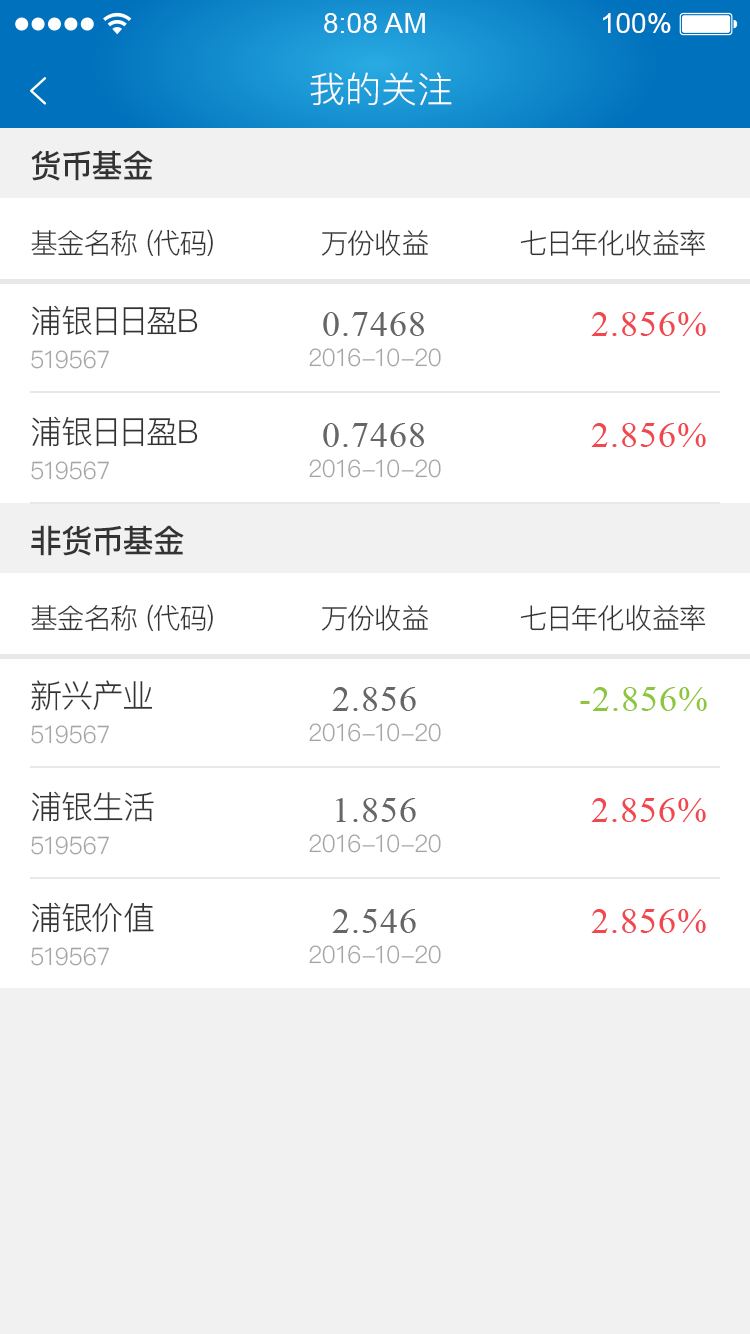
<style>
.page{position:relative;width:750px;height:1334px;background:#ffffff}
.page>*{position:absolute;margin:0}
.t1{font:28.1px "ArialMT";letter-spacing:0.006em;color:#ffffff}
.t2{font:28.1px "ArialMT";letter-spacing:0.005em;color:#ffffff}
.t3{font:28.1px "ArialMT";color:#ffffff}
.t4{font:36px "PingFang-SC-Regular";color:#ffffff}
.t5{font:32px "PingFang-SC-Bold";letter-spacing:-0.047em;color:#333333}
.t6{font:32px "PingFang-SC-Bold";letter-spacing:-0.045em;color:#333333}
.t7{font:32px "PingFang-SC-Bold";letter-spacing:-0.051em;color:#333333}
.t8{font:32px "PingFang-SC-Bold";color:#333333}
.t9{font:28px "PingFang-SC-Regular";letter-spacing:-0.052em;color:#333333}
.t10{font:28px "PingFang-SC-Regular";letter-spacing:-0.041em;color:#333333}
.t11{font:28px "PingFang-SC-Regular";letter-spacing:-0.048em;color:#333333}
.t12{font:28px "PingFang-SC-Regular";letter-spacing:-0.377em;color:#333333}
.t13{font:28px "PingFang-SC-Regular";letter-spacing:-0.09em;color:#333333}
.t14{font:28px "PingFang-SC-Regular";letter-spacing:-0.063em;color:#333333}
.t15{font:28px "PingFang-SC-Regular";letter-spacing:-0.075em;color:#333333}
.t16{font:28px "PingFang-SC-Regular";color:#333333}
.t17{font:28px "PingFang-SC-Regular";letter-spacing:-0.064em;color:#333333}
.t18{font:28px "PingFang-SC-Regular";letter-spacing:-0.038em;color:#333333}
.t19{font:28px "PingFang-SC-Regular";letter-spacing:-0.011em;color:#333333}
.t20{font:28px "PingFang-SC-Regular";letter-spacing:-0.097em;color:#333333}
.t21{font:28px "PingFang-SC-Regular";letter-spacing:-0.086em;color:#333333}
.t22{font:28px "PingFang-SC-Regular";letter-spacing:-0.05em;color:#333333}
.t23{font:28px "PingFang-SC-Regular";letter-spacing:-0.044em;color:#333333}
.t24{font:32px "PingFang-SC-Regular";letter-spacing:-0.039em;color:#333333}
.t25{font:32px "PingFang-SC-Regular";letter-spacing:-0.094em;color:#333333}
.t26{font:32px "PingFang-SC-Regular";letter-spacing:-0.145em;color:#333333}
.t27{font:32px "PingFang-SC-Regular";letter-spacing:-0.087em;color:#333333}
.t28{font:32px "PingFang-SC-Regular";letter-spacing:-0.038em;color:#333333}
.t29{font:32px "PingFang-SC-Regular";color:#333333}
.t30{font:36px "Helvetica-Bold";letter-spacing:0.025em;color:#666666}
.t31{font:36px "Helvetica-Bold";letter-spacing:0.024em;color:#666666}
.t32{font:36px "Helvetica-Bold";color:#666666}
.t33{font:36px "Helvetica-Bold";letter-spacing:0.025em;color:#f0484f}
.t34{font:36px "Helvetica-Bold";letter-spacing:0.024em;color:#f0484f}
.t35{font:36px "Helvetica-Bold";color:#f0484f}
.t36{font:24px "PingFang-SC-Regular";letter-spacing:-0.086em;color:#a5a5a5}
.t37{font:24px "PingFang-SC-Regular";letter-spacing:-0.094em;color:#a5a5a5}
.t38{font:24px "PingFang-SC-Regular";letter-spacing:-0.012em;color:#a5a5a5}
.t39{font:24px "PingFang-SC-Regular";letter-spacing:-0.019em;color:#a5a5a5}
.t40{font:24px "PingFang-SC-Regular";letter-spacing:-0.048em;color:#a5a5a5}
.t41{font:24px "PingFang-SC-Regular";color:#a5a5a5}
.t42{font:24px "PingFang-SC-Regular";letter-spacing:-0.029em;color:#a5a5a5}
.t43{font:24px "PingFang-SC-Regular";letter-spacing:-0.058em;color:#a5a5a5}
.t44{font:24px "PingFang-SC-Regular";letter-spacing:-0.09em;color:#a5a5a5}
.t45{font:24px "PingFang-SC-Regular";letter-spacing:0.008em;color:#a5a5a5}
.t46{font:24px "PingFang-SC-Regular";letter-spacing:-0.099em;color:#a5a5a5}
.t47{font:24px "PingFang-SC-Regular";letter-spacing:0.01em;color:#a5a5a5}
.t48{font:24px "PingFang-SC-Regular";letter-spacing:-0.043em;color:#a5a5a5}
.t49{font:24px "PingFang-SC-Regular";letter-spacing:-0.028em;color:#a5a5a5}
.t50{font:32px "PingFang-SC-Bold";letter-spacing:-0.025em;color:#333333}
.t51{font:32px "PingFang-SC-Regular";letter-spacing:-0.043em;color:#333333}
.t52{font:32px "PingFang-SC-Regular";letter-spacing:-0.032em;color:#333333}
.t53{font:32px "PingFang-SC-Regular";letter-spacing:-0.069em;color:#333333}
.t54{font:36px "Helvetica-Bold";letter-spacing:0.025em;color:#8cc63f}
.t55{font:36px "Helvetica-Bold";letter-spacing:0.024em;color:#8cc63f}
.t56{font:36px "Helvetica-Bold";color:#8cc63f}
.t57{font:32px "PingFang-SC-Regular";letter-spacing:-0.021em;color:#333333}
.t58{font:32px "PingFang-SC-Regular";letter-spacing:-0.03em;color:#333333}
.t59{font:32px "PingFang-SC-Regular";letter-spacing:-0.046em;color:#333333}
.t60{font:32px "PingFang-SC-Regular";letter-spacing:-0.016em;color:#333333}
</style>
<div class="page">
<p class="t1" style="left:324px;top:13px;width:101px;height:20px">8<span class="t2">:</span>0<span class="t2">8 </span>A<span class="t3">M</span></p>
<p class="t3" style="left:603px;top:13px;width:68px;height:20px">100%</p>
<p class="t4" style="left:310px;top:72px;width:142px;height:34px">我的关注</p>
<p class="t5" style="left:31px;top:150px;width:122px;height:31px">货<span class="t6">币</span><span class="t7">基</span><span class="t8">金</span></p>
<p class="t9" style="left:31px;top:229px;width:182px;height:28px">基<span class="t10">金</span><span class="t11">名</span><span class="t12">称</span><span class="t13">（</span><span class="t14">代</span><span class="t15">码</span><span class="t16">）</span></p>
<p class="t17" style="left:322px;top:230px;width:106px;height:26px">万<span class="t18">份</span><span class="t19">收</span><span class="t16">益</span></p>
<p class="t20" style="left:520px;top:229px;width:186px;height:27px">七<span class="t21">日</span><span class="t22">年</span><span class="t18">化</span><span class="t19">收</span><span class="t23">益</span><span class="t16">率</span></p>
<p class="t24" style="left:31px;top:305px;width:167px;height:31px">浦<span class="t25">银</span><span class="t26">日</span><span class="t27">日</span><span class="t28">盈</span><span class="t29">B</span></p>
<p class="t30" style="left:323px;top:312px;width:101px;height:24px">0<span class="t31">.</span>74<span class="t31">6</span><span class="t32">8</span></p>
<p class="t33" style="left:591px;top:312px;width:115px;height:24px">2<span class="t34">.</span>85<span class="t34">6</span><span class="t35">%</span></p>
<p class="t36" style="left:31px;top:350px;width:78px;height:19px">5<span class="t37">1</span><span class="t38">9</span><span class="t39">5</span><span class="t40">6</span><span class="t41">7</span></p>
<p class="t42" style="left:309px;top:348px;width:132px;height:19px">2<span class="t43">0</span><span class="t44">1</span><span class="t45">6</span><span class="t46">-</span><span class="t44">1</span><span class="t47">0</span><span class="t48">-</span><span class="t49">2</span><span class="t41">0</span></p>
<p class="t24" style="left:31px;top:416px;width:167px;height:31px">浦<span class="t25">银</span><span class="t26">日</span><span class="t27">日</span><span class="t28">盈</span><span class="t29">B</span></p>
<p class="t30" style="left:323px;top:423px;width:101px;height:24px">0<span class="t31">.</span>74<span class="t31">6</span><span class="t32">8</span></p>
<p class="t33" style="left:591px;top:423px;width:115px;height:24px">2<span class="t34">.</span>85<span class="t34">6</span><span class="t35">%</span></p>
<p class="t36" style="left:31px;top:461px;width:78px;height:19px">5<span class="t37">1</span><span class="t38">9</span><span class="t39">5</span><span class="t40">6</span><span class="t41">7</span></p>
<p class="t42" style="left:309px;top:459px;width:132px;height:19px">2<span class="t43">0</span><span class="t44">1</span><span class="t45">6</span><span class="t46">-</span><span class="t44">1</span><span class="t47">0</span><span class="t48">-</span><span class="t49">2</span><span class="t41">0</span></p>
<p class="t50" style="left:31px;top:525px;width:153px;height:31px">非<span class="t5">货</span><span class="t6">币</span><span class="t7">基</span><span class="t8">金</span></p>
<p class="t9" style="left:31px;top:604px;width:182px;height:28px">基<span class="t10">金</span><span class="t11">名</span><span class="t12">称</span><span class="t13">（</span><span class="t14">代</span><span class="t15">码</span><span class="t16">）</span></p>
<p class="t17" style="left:322px;top:605px;width:106px;height:26px">万<span class="t18">份</span><span class="t19">收</span><span class="t16">益</span></p>
<p class="t20" style="left:520px;top:604px;width:186px;height:27px">七<span class="t21">日</span><span class="t22">年</span><span class="t18">化</span><span class="t19">收</span><span class="t23">益</span><span class="t16">率</span></p>
<p class="t51" style="left:31px;top:680px;width:122px;height:31px">新<span class="t52">兴</span><span class="t53">产</span><span class="t29">业</span></p>
<p class="t30" style="left:332px;top:687px;width:84px;height:24px">2<span class="t31">.</span>85<span class="t32">6</span></p>
<p class="t54" style="left:580px;top:687px;width:127px;height:24px"><span class="t55">-</span>2<span class="t55">.</span>85<span class="t55">6</span><span class="t56">%</span></p>
<p class="t36" style="left:31px;top:725px;width:78px;height:19px">5<span class="t37">1</span><span class="t38">9</span><span class="t39">5</span><span class="t40">6</span><span class="t41">7</span></p>
<p class="t42" style="left:309px;top:723px;width:132px;height:19px">2<span class="t43">0</span><span class="t44">1</span><span class="t45">6</span><span class="t46">-</span><span class="t44">1</span><span class="t47">0</span><span class="t48">-</span><span class="t49">2</span><span class="t41">0</span></p>
<p class="t24" style="left:31px;top:791px;width:123px;height:31px">浦<span class="t57">银</span><span class="t58">生</span><span class="t29">活</span></p>
<p class="t30" style="left:336px;top:798px;width:80px;height:24px">1<span class="t31">.</span>85<span class="t32">6</span></p>
<p class="t33" style="left:591px;top:798px;width:115px;height:24px">2<span class="t34">.</span>85<span class="t34">6</span><span class="t35">%</span></p>
<p class="t36" style="left:31px;top:836px;width:78px;height:19px">5<span class="t37">1</span><span class="t38">9</span><span class="t39">5</span><span class="t40">6</span><span class="t41">7</span></p>
<p class="t42" style="left:309px;top:834px;width:132px;height:19px">2<span class="t43">0</span><span class="t44">1</span><span class="t45">6</span><span class="t46">-</span><span class="t44">1</span><span class="t47">0</span><span class="t48">-</span><span class="t49">2</span><span class="t41">0</span></p>
<p class="t24" style="left:31px;top:902px;width:123px;height:31px">浦<span class="t59">银</span><span class="t60">价</span><span class="t29">值</span></p>
<p class="t30" style="left:332px;top:909px;width:84px;height:24px">2<span class="t31">.</span>54<span class="t32">6</span></p>
<p class="t33" style="left:591px;top:909px;width:115px;height:24px">2<span class="t34">.</span>85<span class="t34">6</span><span class="t35">%</span></p>
<p class="t36" style="left:31px;top:947px;width:78px;height:19px">5<span class="t37">1</span><span class="t38">9</span><span class="t39">5</span><span class="t40">6</span><span class="t41">7</span></p>
<p class="t42" style="left:309px;top:945px;width:132px;height:19px">2<span class="t43">0</span><span class="t44">1</span><span class="t45">6</span><span class="t46">-</span><span class="t44">1</span><span class="t47">0</span><span class="t48">-</span><span class="t49">2</span><span class="t41">0</span></p>
</div>
